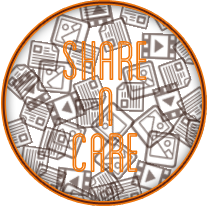
<style>
.page{position:relative;width:207px;height:206px;background:#ffffff}
.page>*{position:absolute;margin:0}
.t1{font:59px "Blanch-CondensedInline";color:#f1780e;text-transform:uppercase}
</style>
<div class="page">
<p class="t1" style="left:63px;top:40px;width:84px;height:41px">share</p>
<p class="t1" style="left:99px;top:87px;width:14px;height:39px">n</p>
<p class="t1" style="left:72px;top:133px;width:66px;height:40px">care</p>
</div>
